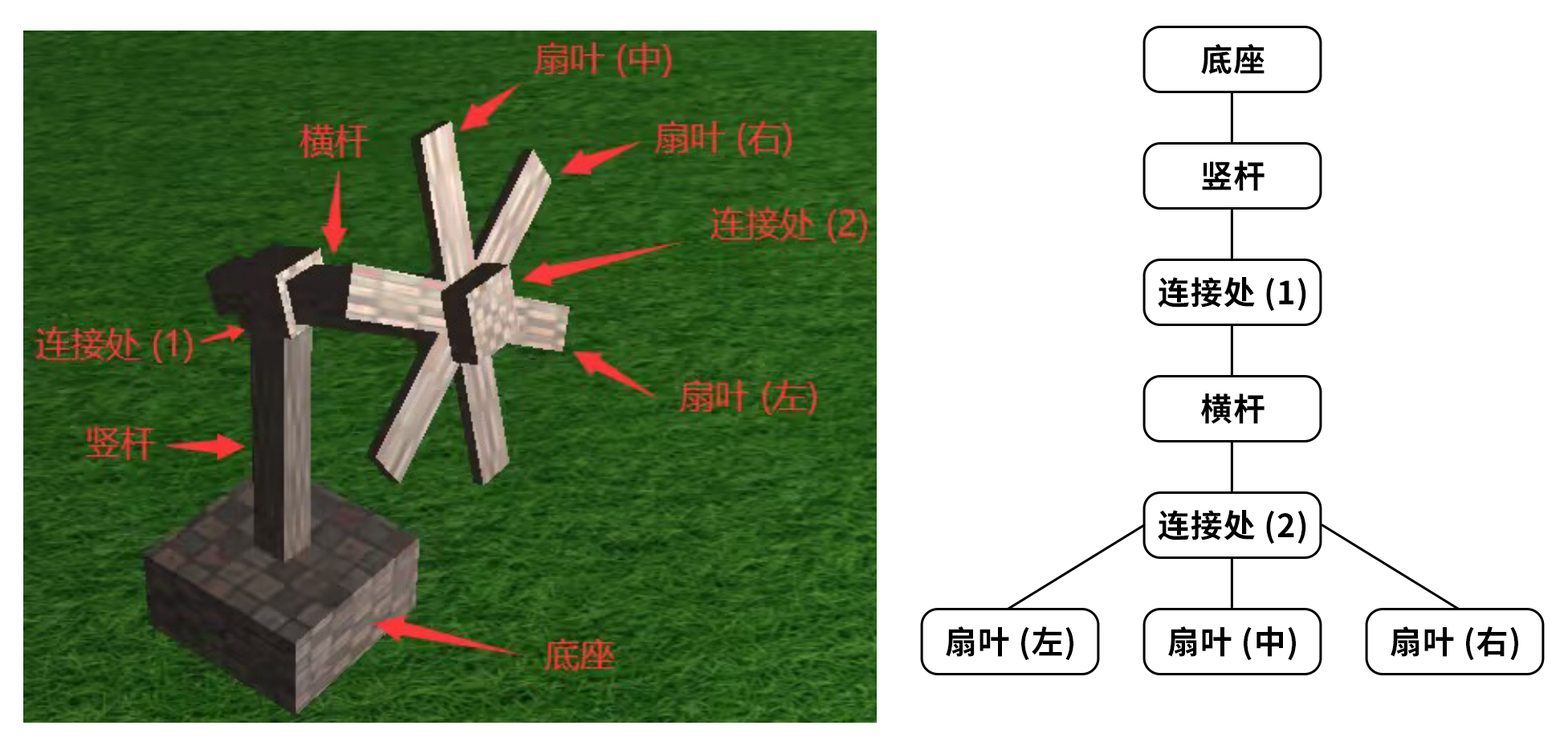
<style>
.page{position:relative;width:1568px;height:746px;background:#ffffff}
.page>*{position:absolute;margin:0}
.t1{font:32.1px "SourceHanSansCN-Bold";letter-spacing:0.02em;color:#000000}
</style>
<div class="page">
<p class="t1" style="left:1201px;top:43px;width:64px;height:32px">底座</p>
<p class="t1" style="left:1202px;top:161px;width:63px;height:30px">竖杆</p>
<p class="t1" style="left:1158px;top:277px;width:148px;height:35px">连接处 (1)</p>
<p class="t1" style="left:1201px;top:393px;width:64px;height:31px">横杆</p>
<p class="t1" style="left:1158px;top:510px;width:148px;height:34px">连接处 (2)</p>
<p class="t1" style="left:946px;top:626px;width:127px;height:35px">扇叶 (左)</p>
<p class="t1" style="left:1168px;top:626px;width:128px;height:35px">扇叶 (中)</p>
<p class="t1" style="left:1391px;top:626px;width:127px;height:35px">扇叶 (右)</p>
</div>
